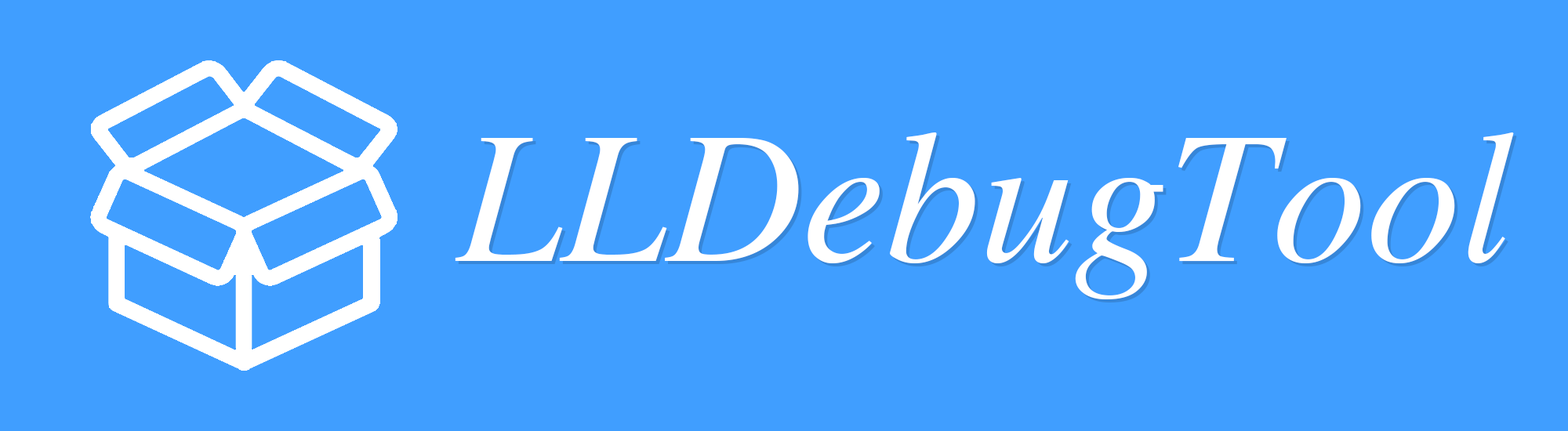
<style>
.page{position:relative;width:1568px;height:431px;background:#409eff}
.page>*{position:absolute;margin:0}
.t1{font:188.2px "Times-Italic";color:#ffffff}
</style>
<div class="page">
<p class="t1" style="left:455px;top:132px;width:1059px;height:167px">LLDebugTool</p>
</div>
